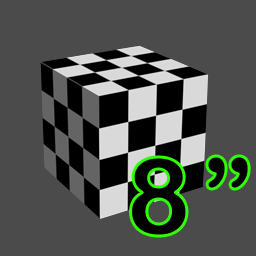
<style>
.page{position:relative;width:256px;height:256px;background:#4b4b4b}
.page>*{position:absolute;margin:0}
.t1{font:106.1px "ArialRoundedMTBold";letter-spacing:0.1em;color:#000000;font-weight:bold}
</style>
<div class="page">
<p class="t1" style="left:130px;top:156px;width:120px;height:80px">8”</p>
</div>
